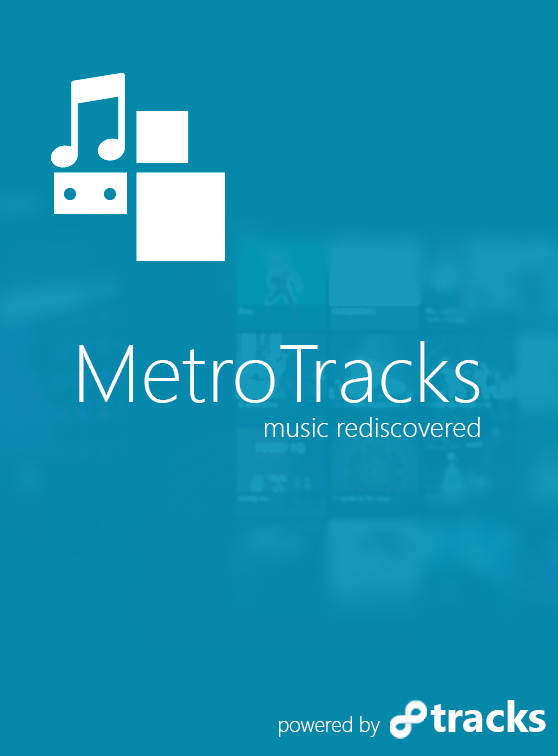
<style>
.page{position:relative;width:558px;height:756px;background:#0388aa}
.page>*{position:absolute;margin:0}
.t1{font:82.4px "SegoeUI-Light";color:#ffffff}
.t2{font:27.5px "SegoeUI-Light";color:#ffffff}
.t3{font:41.5px "SegoeUI-Bold";color:#ffffff}
.t4{font:20.6px "SegoeUI-Light";color:#ffffff}
</style>
<div class="page">
<p class="t1" style="left:79px;top:341px;width:401px;height:62px">MetroTracks</p>
<p class="t2" style="left:265px;top:417px;width:215px;height:20px">music rediscovered</p>
<p class="t3" style="left:430px;top:700px;width:116px;height:32px">tracks</p>
<p class="t4" style="left:279px;top:716px;width:101px;height:21px">powered by</p>
</div>
